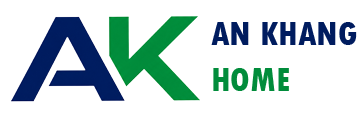
<style>
.page{position:relative;width:360px;height:120px;background:#ffffff}
.page>*{position:absolute;margin:0}
.t1{font:35px "TwCenMT-CondensedExtraBold";color:#001c5f}
.t2{font:35px "TwCenMT-CondensedExtraBold";color:#018c3b}
</style>
<div class="page">
<p class="t1" style="left:211px;top:22px;width:146px;height:23px">AN KHANG</p>
<p class="t2" style="left:213px;top:68px;width:76px;height:23px">HOME</p>
</div>
